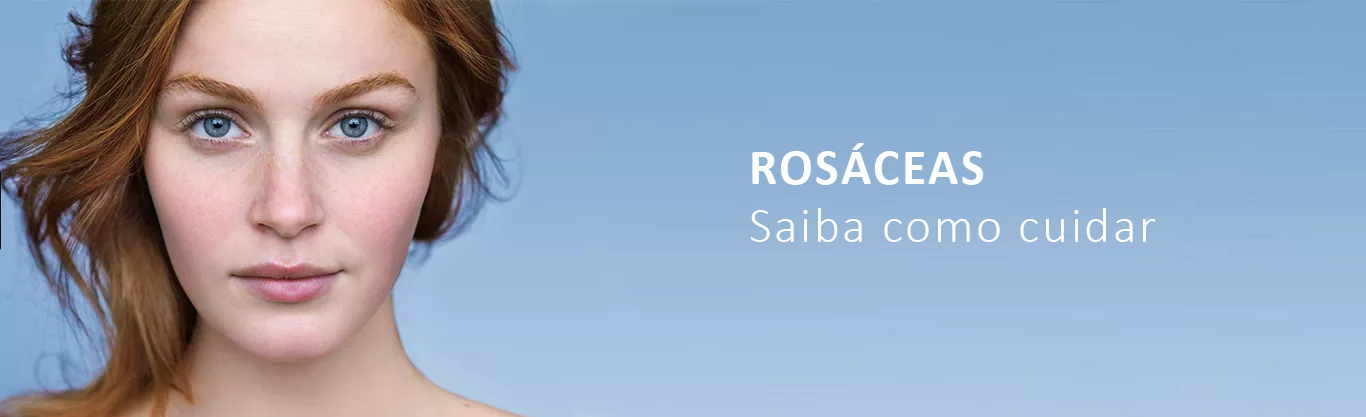
<style>
.page{position:relative;width:1366px;height:417px}
.page>*{position:absolute;margin:0}
.t1{font:50px "Calibri-Bold";letter-spacing:0.05em;color:#ffffff}
.t2{font:50px "Calibri-Light";letter-spacing:0.05em;color:#ffffff}
</style>
<div class="page">
<p class="t1" style="left:752px;top:143px;width:232px;height:42px">ROSÁCEAS</p>
<p class="t2" style="left:750px;top:208px;width:406px;height:34px">Saiba como cuidar</p>
</div>
